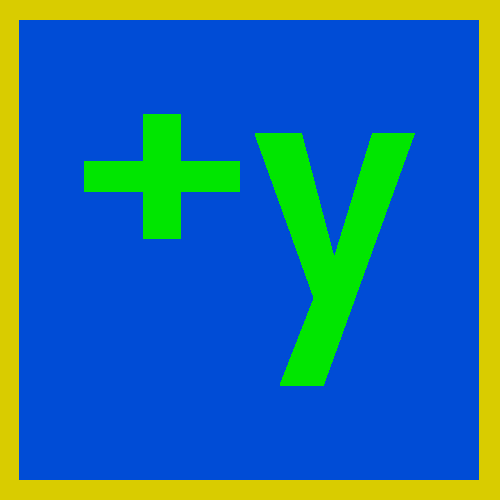
<style>
.page{position:relative;width:500px;height:500px;background:#004cd6}
.page>*{position:absolute;margin:0}
.t1{font:353px "Futura-CondensedMedium";color:#00e600;scale:1.25 1}
</style>
<div class="page">
<p class="t1" style="left:84px;top:114px;width:331px;height:272px">+y</p>
</div>
